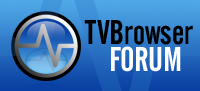
<style>
.page{position:relative;width:200px;height:91px}
.page>*{position:absolute;margin:0}
.t1{font:34px "AlternateGothicNo2BT-Regular";color:#000000}
.t2{font:34px "AlternateGothicNo2BT-Regular";color:#ffffff}
</style>
<div class="page">
<p class="t1" style="left:84px;top:20px;width:109px;height:25px">TVBrowser</p>
<p class="t2" style="left:111px;top:46px;width:70px;height:26px">FORUM</p>
</div>
